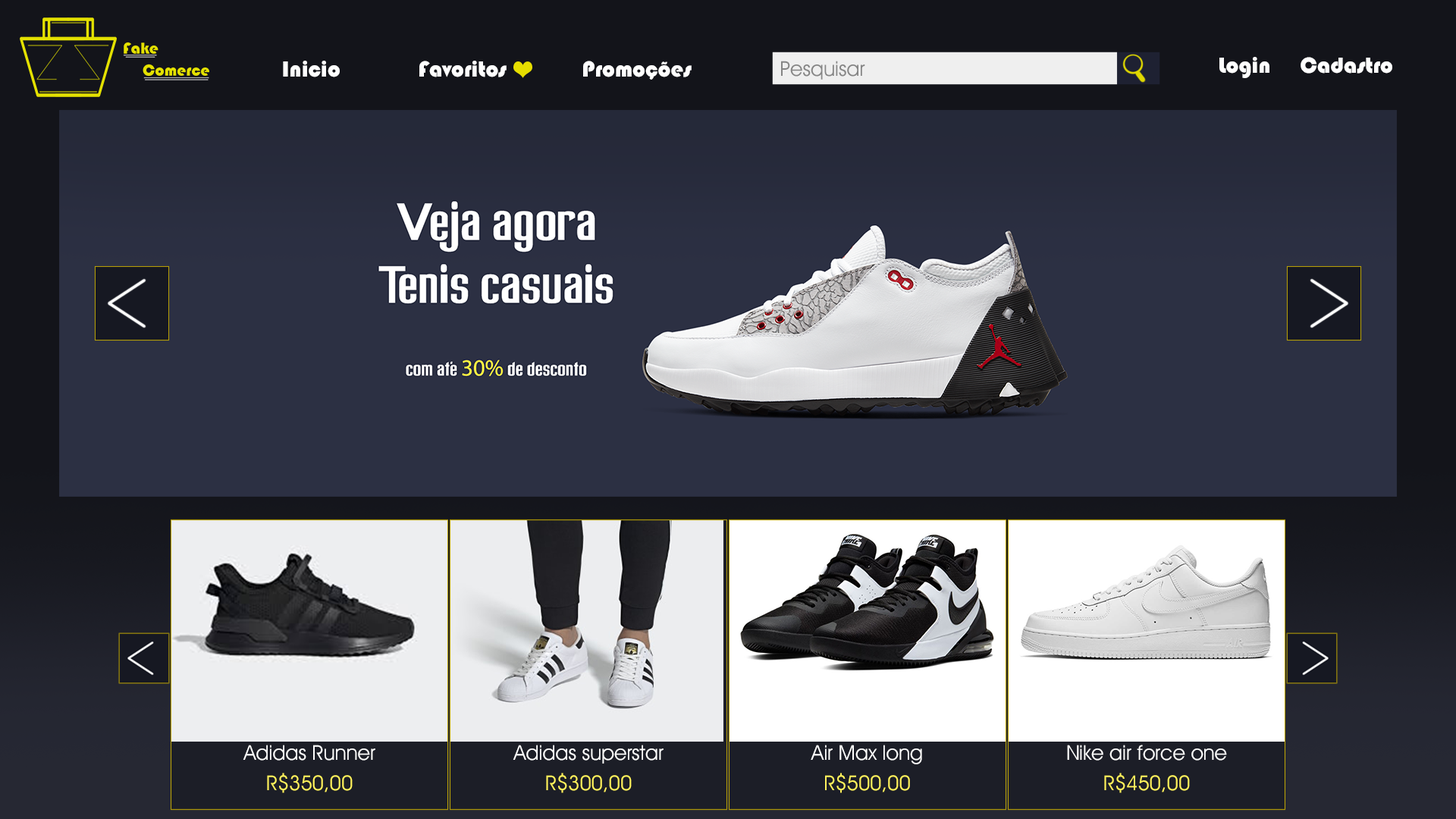
<style>
.page{position:relative;width:1456px;height:819px}
.page>*{position:absolute;margin:0}
.t1{font:22.7px "Bauhaus93";color:#ffffff}
.t2{font:20.5px/30.3px "Decker-Regular";color:#ffffff}
.t3{font:20.5px/60.7px "Decker-Regular";color:#ffffff}
.t4{font:20.5px/30.3px "Decker-Regular";color:#fff25c}
</style>
<div class="page">
<p class="t1" style="left:283px;top:61px;width:409px;height:19px">Inicio   Favoritos   Promoções</p>
<p class="t1" style="left:1219px;top:57px;width:173px;height:21px">Login  Cadastro</p>
<p class="t2" style="left:243px;top:745px;width:132px;height:48px;text-align:center"><span class="t3">A</span>didas Runner<br><span class="t4">R$350,00</span></p>
<p class="t2" style="left:513px;top:745px;width:151px;height:48px;text-align:center"><span class="t3">A</span>didas superstar<br><span class="t4">R$300,00</span></p>
<p class="t2" style="left:811px;top:745px;width:111px;height:48px;text-align:center"><span class="t3">A</span>ir Max long<br><span class="t4">R$500,00</span></p>
<p class="t3" style="left:1067px;top:745px;width:160px;height:48px;text-align:center">Nike air force one<br><span class="t4">R$450,00</span></p>
</div>
